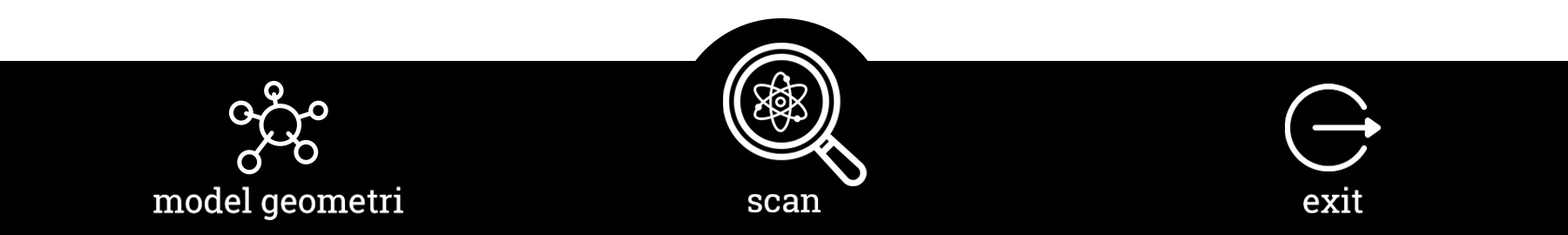
<style>
.page{position:relative;width:1568px;height:235px;background:#000000}
.page>*{position:absolute;margin:0}
.t1{font:33.7px "RobotoSlab-Regular";color:#ffffff}
</style>
<div class="page">
<p class="t1" style="left:153px;top:186px;width:250px;height:34px">model geometri</p>
<p class="t1" style="left:748px;top:194px;width:73px;height:19px">scan</p>
<p class="t1" style="left:1303px;top:186px;width:60px;height:27px">exit</p>
</div>
